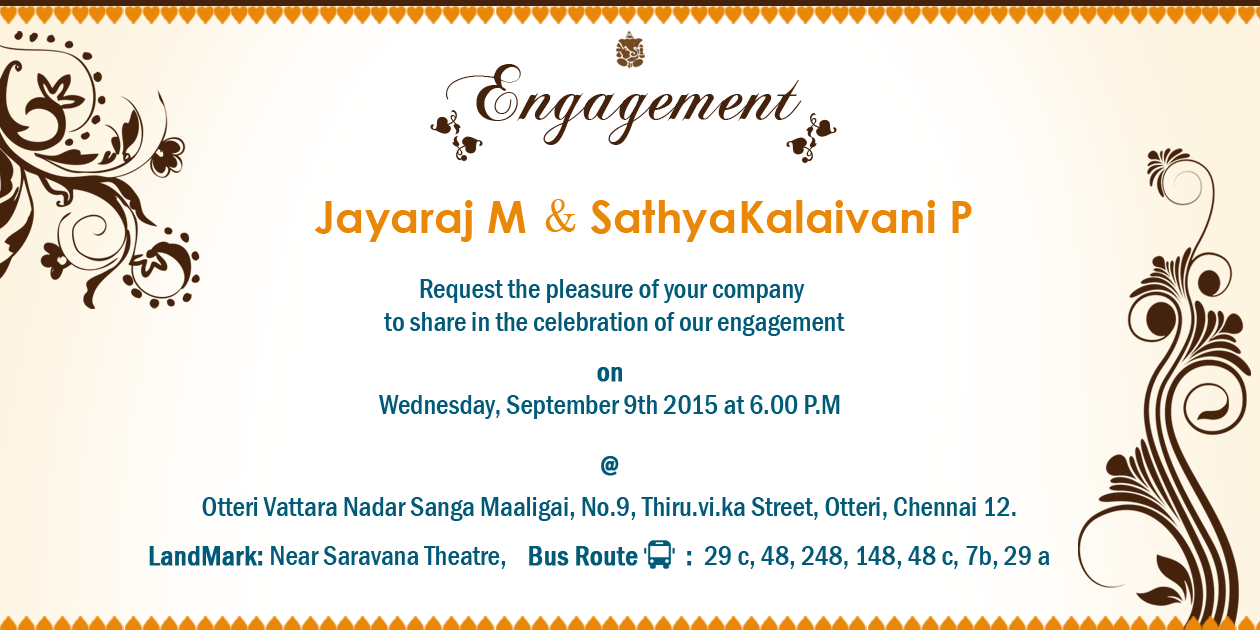
<style>
.page{position:relative;width:1260px;height:630px;background:#ffffff}
.page>*{position:absolute;margin:0}
.t1{font:83.3px "ChopinScript";color:#44220c}
.t2{font:44.4px "CenturyGothic-Bold";color:#e88708}
.t3{font:41.7px "Century";color:#e88708}
.t4{font:27.8px "FranklinGothic-MediumCond";color:#005a78}
.t5{font:27.8px "FranklinGothic-MediumCond";color:#005a78;font-weight:bold}
.t6{font:27.8px/41.7px "FranklinGothic-MediumCond";color:#005a78}
</style>
<div class="page">
<p class="t1" style="left:446px;top:64px;width:356px;height:81px">Engagement</p>
<p class="t2" style="left:314px;top:200px;width:212px;height:42px">Jayaraj M</p>
<p class="t3" style="left:545px;top:199px;width:31px;height:33px">&amp;</p>
<p class="t2" style="left:590px;top:200px;width:382px;height:42px">SathyaKalaivani P</p>
<p class="t4" style="left:384px;top:279px;width:461px;height:57px;text-align:center">Request the pleasure of your company <br>to share in the celebration of our engagement</p>
<p class="t4" style="left:379px;top:367px;width:461px;height:52px;text-align:center"><span class="t5">on<br></span>Wednesday, September 9th 2015 at 6.00 P.M</p>
<p class="t6" style="left:202px;top:456px;width:814px;height:65px;text-align:center"><span class="t5">@<br></span>Otteri Vattara Nadar Sanga Maaligai, No.9, Thiru.vi.ka Street, Otteri, Chennai 12.</p>
<p class="t4" style="left:149px;top:546px;width:901px;height:23px"><span class="t5">LandMark: </span>Near Saravana Theatre,    <span class="t5">Bus Route        : </span> 29 c, 48, 248, 148, 48 c, 7b, 29 a</p>
</div>
